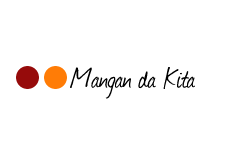
<style>
.page{position:relative;width:250px;height:160px;background:#ffffff}
.page>*{position:absolute;margin:0}
.t1{font:33px "Journal";color:#000000}
</style>
<div class="page">
<p class="t1" style="left:69px;top:66px;width:127px;height:33px">Mangan da Kita</p>
</div>
